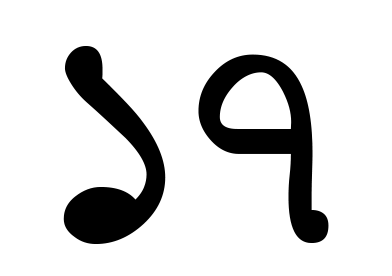
<style>
.page{position:relative;width:392px;height:276px;background:#ffffff}
.page>*{position:absolute;margin:0}
.t1{font:300px "KalpurushANSI";color:#000000}
</style>
<div class="page">
<p class="t1" style="left:63px;top:46px;width:266px;height:198px">17</p>
</div>
